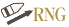
<style>
.page{position:relative;width:69px;height:27px;background:#ffffff}
.page>*{position:absolute;margin:0}
.t1{font:18px "RyuminPro-ExBold";letter-spacing:-0.08em;color:#ae9442;scale:0.9 1}
</style>
<div class="page">
<p class="t1" style="left:33px;top:7px;width:34px;height:15px">RNG</p>
</div>
